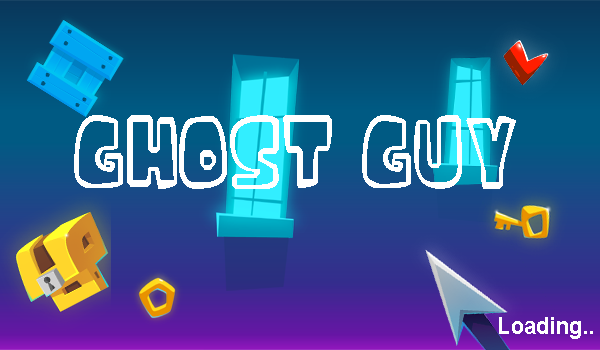
<style>
.page{position:relative;width:600px;height:350px}
.page>*{position:absolute;margin:0}
.t1{font:152.6px "iceagefont";color:#ffffff;scale:0.7 1}
.t2{font:24.5px "Arial-BoldMT";color:#ffffff;scale:0.9 1}
</style>
<div class="page">
<p class="t1" style="left:74px;top:115px;width:442px;height:74px">GHOST GUY</p>
<p class="t2" style="left:499px;top:317px;width:94px;height:22px">Loading..</p>
</div>
